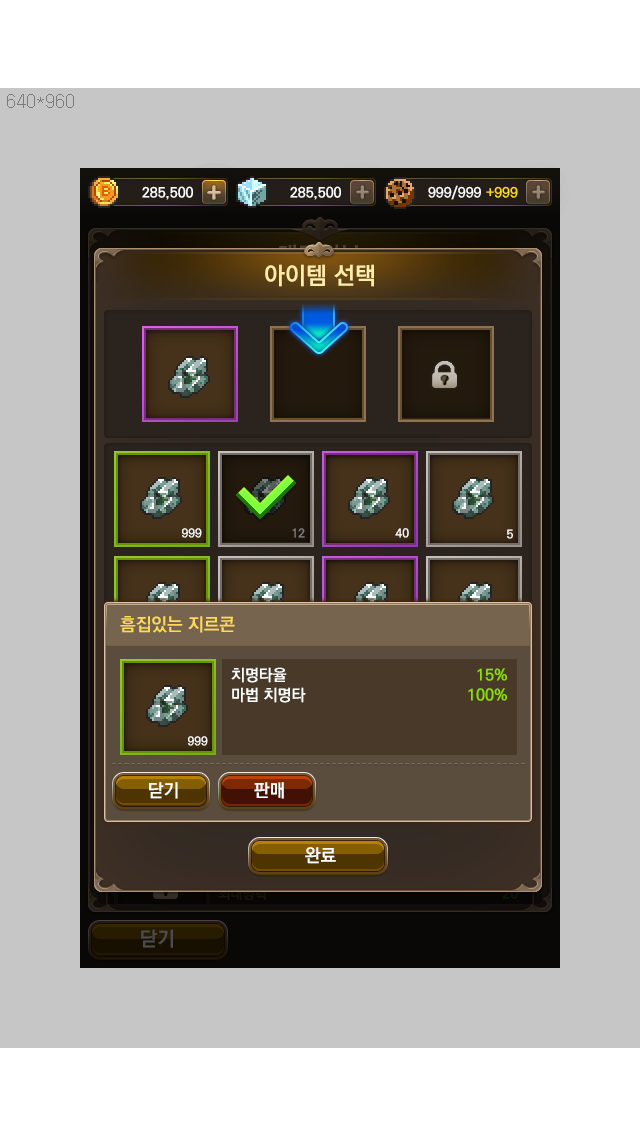
<style>
.page{position:relative;width:640px;height:1136px;background:#c6c6c6}
.page>*{position:absolute;margin:0}
.t1{font:24px "KoPubDotumBold";color:#ffedab}
.t2{font:12px "KoPubDotumBold";color:#ffffff}
.t3{font:12px "KoPubDotumBold";color:#7f7f7f}
.t4{font:18px "KoPubDotumBold";color:#ffda58}
.t5{font:16px "KoPubDotumBold";color:#ffffff}
.t6{font:16px "KoPubDotumBold";color:#8ae001}
.t7{font:18px "KoPubDotumBold";color:#ffffff}
</style>
<div class="page">
<p class="t1" style="left:265px;top:264px;width:109px;height:23px">아이템 선택</p>
<p class="t2" style="left:182px;top:528px;width:20px;height:10px">999</p>
<p class="t3" style="left:292px;top:528px;width:13px;height:10px">12</p>
<p class="t4" style="left:120px;top:616px;width:115px;height:17px">흠집있는 지르콘</p>
<p class="t5" style="left:231px;top:667px;width:75px;height:36px">치명타율<br>마법 치명타</p>
<p class="t6" style="left:468px;top:668px;width:39px;height:33px;text-align:right">15%<br>100%</p>
<p class="t2" style="left:188px;top:736px;width:20px;height:10px">999</p>
<p class="t7" style="left:149px;top:782px;width:29px;height:17px">닫기</p>
<p class="t7" style="left:254px;top:782px;width:30px;height:17px">판매</p>
<p class="t7" style="left:305px;top:847px;width:31px;height:17px">완료</p>
</div>
